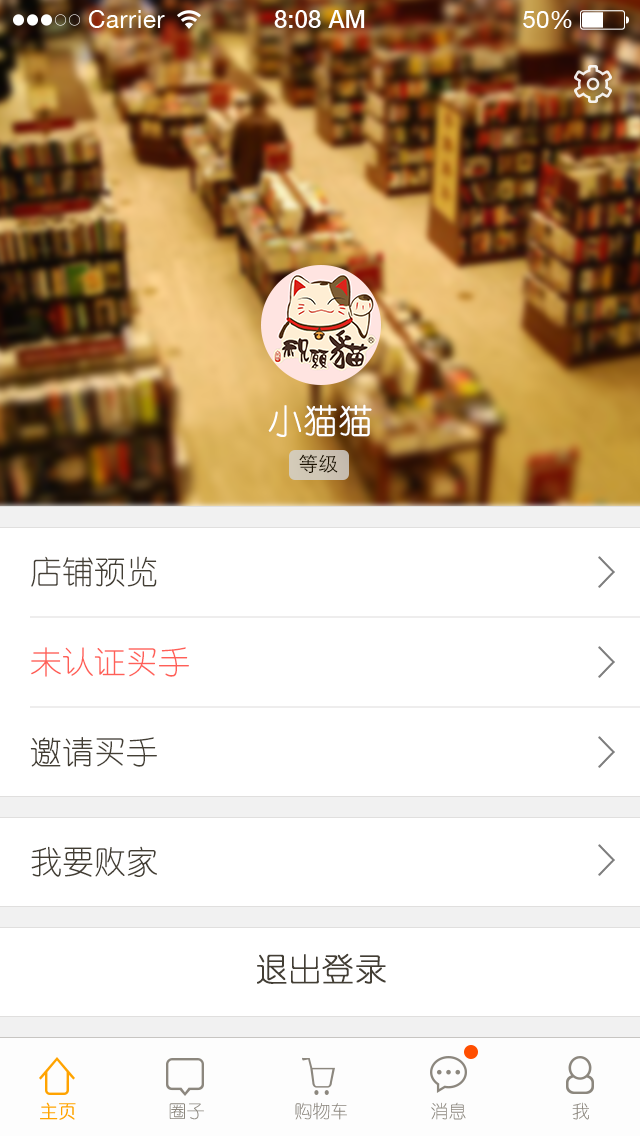
<style>
.page{position:relative;width:640px;height:1136px;background:#ffffff}
.page>*{position:absolute;margin:0}
.t1{font:34px "YouYuan";color:#ffffff;font-weight:bold}
.t2{font:20px "STHeitiSC-Light";color:#1b1100;text-transform:uppercase}
.t3{font:32px "YouYuan";color:#433e34}
.t4{font:32px "YouYuan";color:#ff5f57}
.t5{font:32px "YouYuan";color:#433e34;font-weight:bold}
.t6{font:18px "YouYuan";color:#ffa300;font-weight:bold}
.t7{font:18px "YouYuan";color:#8c877e;text-transform:uppercase}
.t8{font:18px "YouYuan";text-transform:uppercase}
</style>
<div class="page">
<p class="t1" style="left:268px;top:404px;width:104px;height:33px">小猫猫</p>
<p class="t2" style="left:299px;top:454px;width:39px;height:19px">等级</p>
<p class="t3" style="left:31px;top:556px;width:126px;height:31px">店铺预览</p>
<p class="t4" style="left:31px;top:647px;width:158px;height:30px">未认证买手</p>
<p class="t3" style="left:30px;top:737px;width:127px;height:30px">邀请买手</p>
<p class="t3" style="left:31px;top:846px;width:126px;height:31px">我要败家</p>
<p class="t5" style="left:257px;top:953px;width:129px;height:31px">退出登录</p>
<p class="t6" style="left:40px;top:1102px;width:36px;height:18px">主页</p>
<p class="t7" style="left:169px;top:1103px;width:35px;height:17px">圈子</p>
<p class="t7" style="left:295px;top:1102px;width:52px;height:18px">购物车</p>
<p class="t8" style="left:431px;top:1102px;width:35px;height:18px">消息</p>
<p class="t7" style="left:572px;top:1102px;width:17px;height:18px">我</p>
</div>
